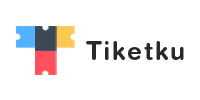
<style>
.page{position:relative;width:200px;height:100px;background:#ffffff}
.page>*{position:absolute;margin:0}
.t1{font:25px "HelveticaRounded-Bold";letter-spacing:0.075em;color:#292929}
</style>
<div class="page">
<p class="t1" style="left:86px;top:41px;width:98px;height:19px">Tiketku</p>
</div>
